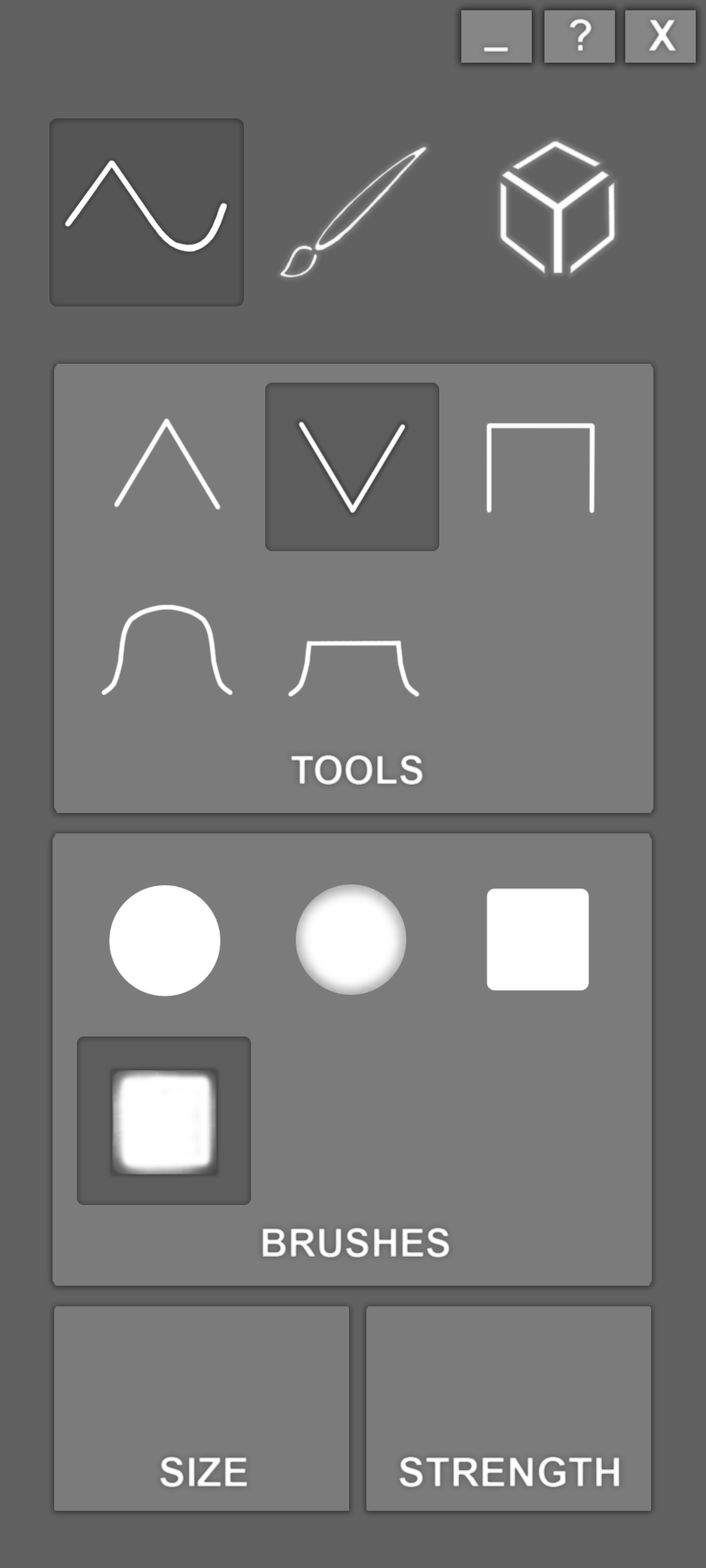
<style>
.page{position:relative;width:706px;height:1568px;background:#7b7b7b}
.page>*{position:absolute;margin:0}
.t1{font:43.1px "Arial-BoldMT";color:#ffffff}
.t2{font:39.2px "Arial-BoldMT";color:#ffffff}
.t3{font:40.8px "Arial-BoldMT";color:#ffffff}
</style>
<div class="page">
<p class="t1" style="left:648px;top:20px;width:29px;height:31px">X</p>
<p class="t1" style="left:483px;top:47px;width:25px;height:5px">_</p>
<p class="t2" style="left:291px;top:755px;width:132px;height:30px">TOOLS</p>
<p class="t2" style="left:262px;top:1228px;width:187px;height:30px">BRUSHES</p>
<p class="t3" style="left:159px;top:1457px;width:89px;height:30px">SIZE</p>
<p class="t3" style="left:398px;top:1457px;width:221px;height:30px">STRENGTH</p>
</div>
